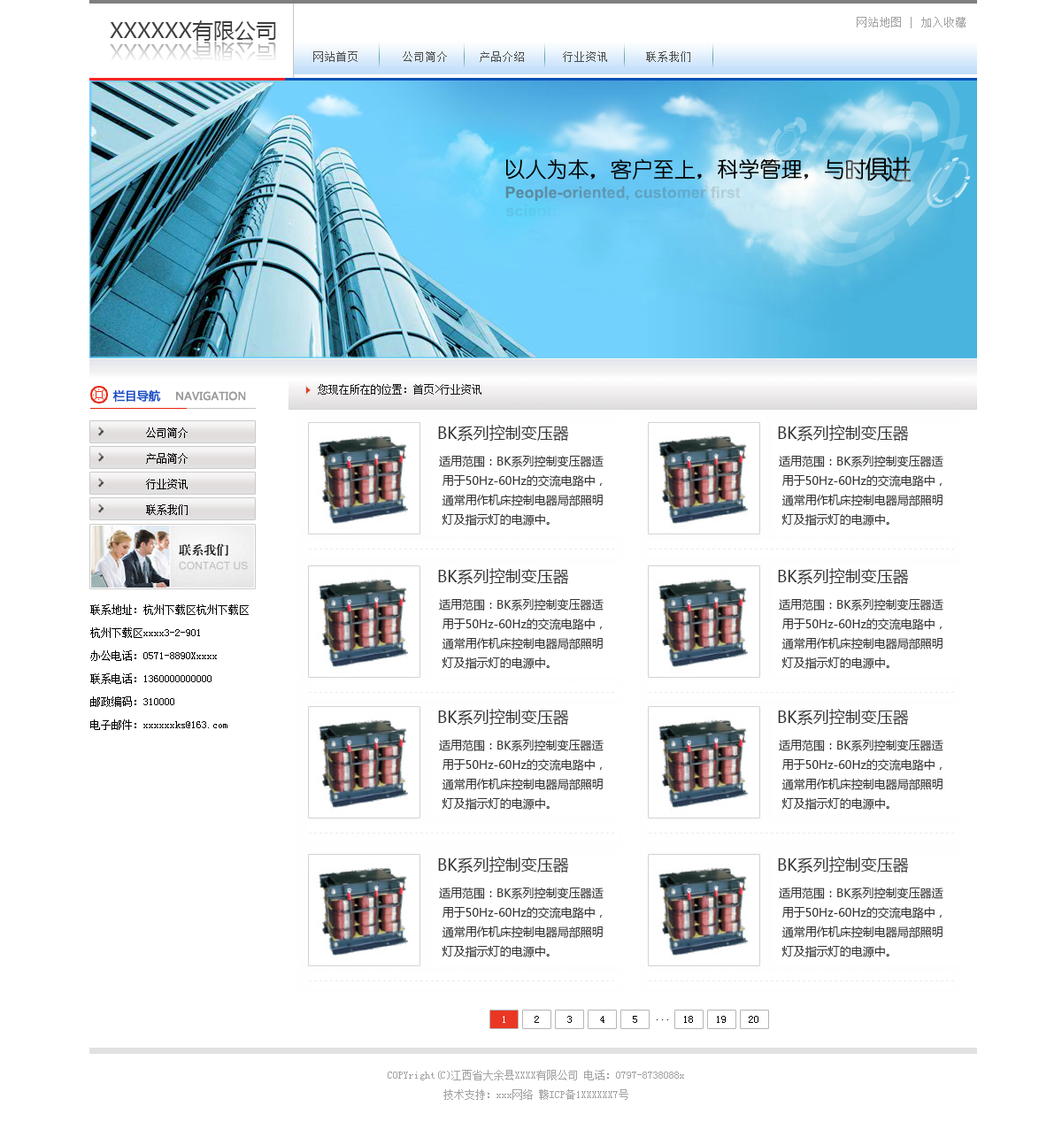
<style>
.page{position:relative;width:1062px;height:1122px;background:#ffffff}
.page>*{position:absolute;margin:0}
.t1{font:11.5px "SimSun";color:#a3a2a2}
.t2{font:21.2px "MicrosoftYaHei";color:#3f3f3f}
.t3{font:21.2px "MicrosoftYaHei"}
.t4{font:11.5px "SimSun";color:#4d4c4c}
.t5{font:10.6px "MicrosoftYaHei";color:#9a9a9a;font-weight:bold}
.t6{font:11.5px "MicrosoftYaHei";color:#1952c6;font-weight:bold}
.t7{font:10.6px "SimSun";color:#191919}
.t8{font:15.9px "MicrosoftYaHei";color:#323232}
.t9{font:10.6px "SimSun";color:#000000}
.t10{font:11.5px/19.5px "MicrosoftYaHei";color:#323232}
.t11{font:10.6px/23px "SimSun";color:#000000}
.t12{font:10.6px "SimSun";color:#ffffff}
.t13{font:10.6px/19.5px "SimSun";color:#a4a2a2}
</style>
<div class="page">
<p class="t1" style="left:857px;top:17px;width:109px;height:11px">网站地图 | 加入收藏</p>
<p class="t2" style="left:110px;top:20px;width:166px;height:21px">XXXXXX有限公司</p>
<p class="t3" style="left:110px;top:42px;width:166px;height:20px">XXXXXX有限公司</p>
<p class="t4" style="left:313px;top:51px;width:377px;height:11px">网站首页       公司简介     产品介绍      行业资讯      联系我们</p>
<p class="t5" style="left:112px;top:390px;width:134px;height:12px"><span class="t6">栏目导航    </span>NAVIGATION</p>
<p class="t7" style="left:318px;top:384px;width:164px;height:11px">您现在所在的位置：首页&gt;行业资讯</p>
<p class="t8" style="left:438px;top:425px;width:131px;height:17px">BK系列控制变压器</p>
<p class="t8" style="left:778px;top:425px;width:131px;height:17px">BK系列控制变压器</p>
<p class="t9" style="left:146px;top:428px;width:42px;height:10px">公司简介</p>
<p class="t9" style="left:146px;top:453px;width:42px;height:11px">产品简介</p>
<p class="t10" style="left:439px;top:455px;width:165px;height:71px">适用范围：BK系列控制变压器适<br> 用于50Hz-60Hz的交流电路中，<br> 通常用作机床控制电器局部照明<br> 灯及指示灯的电源中。</p>
<p class="t10" style="left:779px;top:455px;width:165px;height:71px">适用范围：BK系列控制变压器适<br> 用于50Hz-60Hz的交流电路中，<br> 通常用作机床控制电器局部照明<br> 灯及指示灯的电源中。</p>
<p class="t9" style="left:146px;top:479px;width:42px;height:11px">行业资讯</p>
<p class="t9" style="left:146px;top:505px;width:42px;height:10px">联系我们</p>
<p class="t8" style="left:438px;top:568px;width:131px;height:17px">BK系列控制变压器</p>
<p class="t8" style="left:778px;top:568px;width:131px;height:17px">BK系列控制变压器</p>
<p class="t11" style="left:90px;top:605px;width:159px;height:125px">联系地址：杭州下载区杭州下载区<br>杭州下载区xxxx3-2-901<br>办公电话：0571-8890Xxxxx<br>联系电话：1360000000000<br>邮政编码：310000<br>电子邮件：xxxxxxks@163.com</p>
<p class="t10" style="left:439px;top:598px;width:165px;height:71px">适用范围：BK系列控制变压器适<br> 用于50Hz-60Hz的交流电路中，<br> 通常用作机床控制电器局部照明<br> 灯及指示灯的电源中。</p>
<p class="t10" style="left:779px;top:598px;width:165px;height:71px">适用范围：BK系列控制变压器适<br> 用于50Hz-60Hz的交流电路中，<br> 通常用作机床控制电器局部照明<br> 灯及指示灯的电源中。</p>
<p class="t8" style="left:438px;top:709px;width:131px;height:17px">BK系列控制变压器</p>
<p class="t8" style="left:778px;top:709px;width:131px;height:17px">BK系列控制变压器</p>
<p class="t10" style="left:439px;top:739px;width:165px;height:71px">适用范围：BK系列控制变压器适<br> 用于50Hz-60Hz的交流电路中，<br> 通常用作机床控制电器局部照明<br> 灯及指示灯的电源中。</p>
<p class="t10" style="left:779px;top:739px;width:165px;height:71px">适用范围：BK系列控制变压器适<br> 用于50Hz-60Hz的交流电路中，<br> 通常用作机床控制电器局部照明<br> 灯及指示灯的电源中。</p>
<p class="t8" style="left:438px;top:857px;width:131px;height:17px">BK系列控制变压器</p>
<p class="t8" style="left:778px;top:857px;width:131px;height:17px">BK系列控制变压器</p>
<p class="t10" style="left:439px;top:887px;width:165px;height:71px">适用范围：BK系列控制变压器适<br> 用于50Hz-60Hz的交流电路中，<br> 通常用作机床控制电器局部照明<br> 灯及指示灯的电源中。</p>
<p class="t10" style="left:779px;top:887px;width:165px;height:71px">适用范围：BK系列控制变压器适<br> 用于50Hz-60Hz的交流电路中，<br> 通常用作机床控制电器局部照明<br> 灯及指示灯的电源中。</p>
<p class="t12" style="left:503px;top:1016px;width:2px;height:7px">1</p>
<p class="t9" style="left:535px;top:1016px;width:4px;height:7px">2</p>
<p class="t9" style="left:567px;top:1016px;width:5px;height:7px">3</p>
<p class="t9" style="left:600px;top:1016px;width:5px;height:7px">4</p>
<p class="t9" style="left:633px;top:1016px;width:4px;height:7px">5</p>
<p class="t9" style="left:657px;top:1020px;width:11px;height:1px">...</p>
<p class="t9" style="left:684px;top:1016px;width:9px;height:7px">18</p>
<p class="t9" style="left:717px;top:1016px;width:9px;height:7px">19</p>
<p class="t9" style="left:749px;top:1016px;width:10px;height:7px">20</p>
<p class="t13" style="left:388px;top:1070px;width:296px;height:30px;text-align:center">COPYright(C)江西省大余县XXXX有限公司 电话：0797-8738088x<br>技术支持：xxx网络 赣ICP备1XXXXXX7号</p>
</div>
